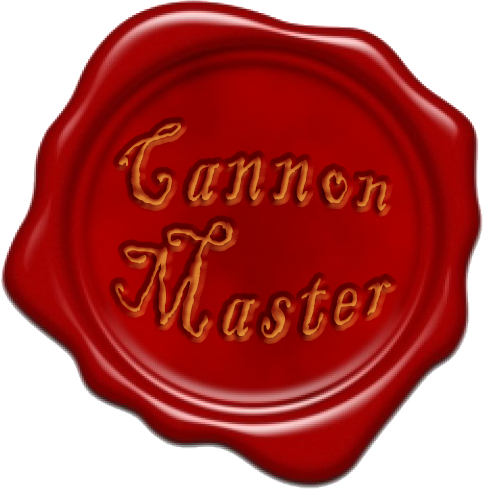
<style>
.page{position:relative;width:483px;height:489px;background:#ffffff}
.page>*{position:absolute;margin:0}
.t1{font:85px/85px "BlackadderITC-Regular";letter-spacing:0.1em}
</style>
<div class="page">
<p class="t1" style="left:115px;top:122px;width:276px;height:216px;text-align:center">Cannon<br>Master</p>
</div>
